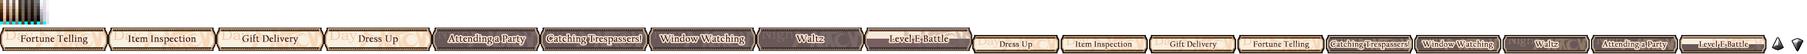
<style>
.page{position:relative;width:1807px;height:54px;background:#ffffff}
.page>*{position:absolute;margin:0}
.t1{font:9.8px "CalifornianFB-Reg";letter-spacing:0.01em;color:#401000;font-weight:bold}
.t2{font:8.2px "CalifornianFB-Reg";letter-spacing:0.01em;color:#401000;font-weight:bold}
</style>
<div class="page">
<p class="t1" style="left:20px;top:34px;width:68px;height:11px">Fortune Telling</p>
<p class="t1" style="left:128px;top:35px;width:68px;height:10px">Item Inspection</p>
<p class="t1" style="left:242px;top:34px;width:56px;height:11px">Gift Delivery</p>
<p class="t1" style="left:358px;top:35px;width:40px;height:10px">Dress Up</p>
<p class="t1" style="left:448px;top:34px;width:77px;height:11px">Attending a Party</p>
<p class="t1" style="left:547px;top:34px;width:94px;height:11px">Catching Trespassers!</p>
<p class="t1" style="left:660px;top:34px;width:84px;height:11px">Window Watching</p>
<p class="t1" style="left:796px;top:34px;width:28px;height:8px">Waltz</p>
<p class="t1" style="left:889px;top:34px;width:59px;height:8px">Level E Battle</p>
<p class="t2" style="left:999px;top:41px;width:33px;height:8px">Dress Up</p>
<p class="t2" style="left:1075px;top:41px;width:57px;height:8px">Item Inspection</p>
<p class="t2" style="left:1170px;top:41px;width:47px;height:8px">Gift Delivery</p>
<p class="t2" style="left:1253px;top:41px;width:56px;height:8px">Fortune Telling</p>
<p class="t2" style="left:1330px;top:41px;width:79px;height:8px">Catching Trespassers!</p>
<p class="t2" style="left:1422px;top:41px;width:71px;height:8px">Window Watching</p>
<p class="t2" style="left:1535px;top:41px;width:22px;height:6px">Waltz</p>
<p class="t2" style="left:1602px;top:41px;width:65px;height:8px">Attending a Party</p>
<p class="t2" style="left:1699px;top:41px;width:49px;height:6px">Level E Battle</p>
</div>
